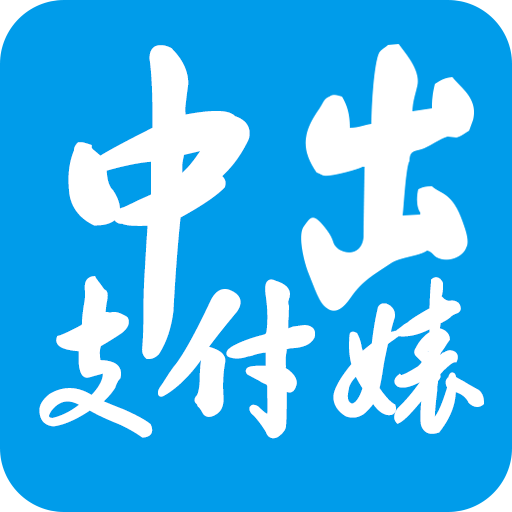
<style>
.page{position:relative;width:512px;height:512px;background:#009cea}
.page>*{position:absolute;margin:0}
.t1{font:380px "FZHCJW--GB1-0";color:#ffffff;font-weight:bold}
.t2{font:190px "FZHCJW--GB1-0";color:#ffffff;font-weight:bold}
.t3{font:190px "FZHCJW--GB1-0";letter-spacing:-0.145em;color:#ffffff;font-weight:bold}
</style>
<div class="page">
<p class="t1" style="left:68px;top:45px;width:182px;height:314px">中</p>
<p class="t2" style="left:39px;top:276px;width:114px;height:162px">支</p>
<p class="t3" style="left:158px;top:277px;width:326px;height:162px">付婊</p>
</div>
